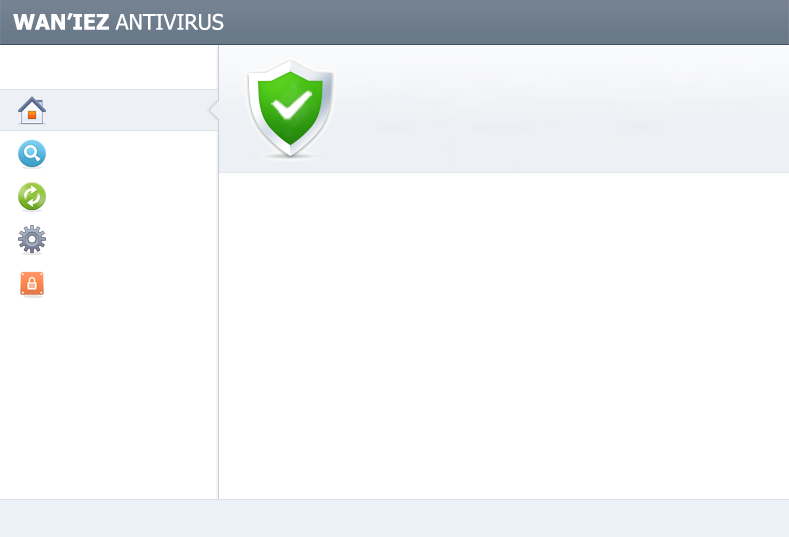
<style>
.page{position:relative;width:789px;height:537px;background:#ffffff}
.page>*{position:absolute;margin:0}
.t1{font:21.5px "Tahoma";color:#ffffff}
.t2{font:21.5px "Tahoma-Bold";color:#ffffff}
</style>
<div class="page">
<p class="t1" style="left:13px;top:13px;width:211px;height:18px"><span class="t2">WAN’IEZ </span>ANTIVIRUS</p>
</div>
